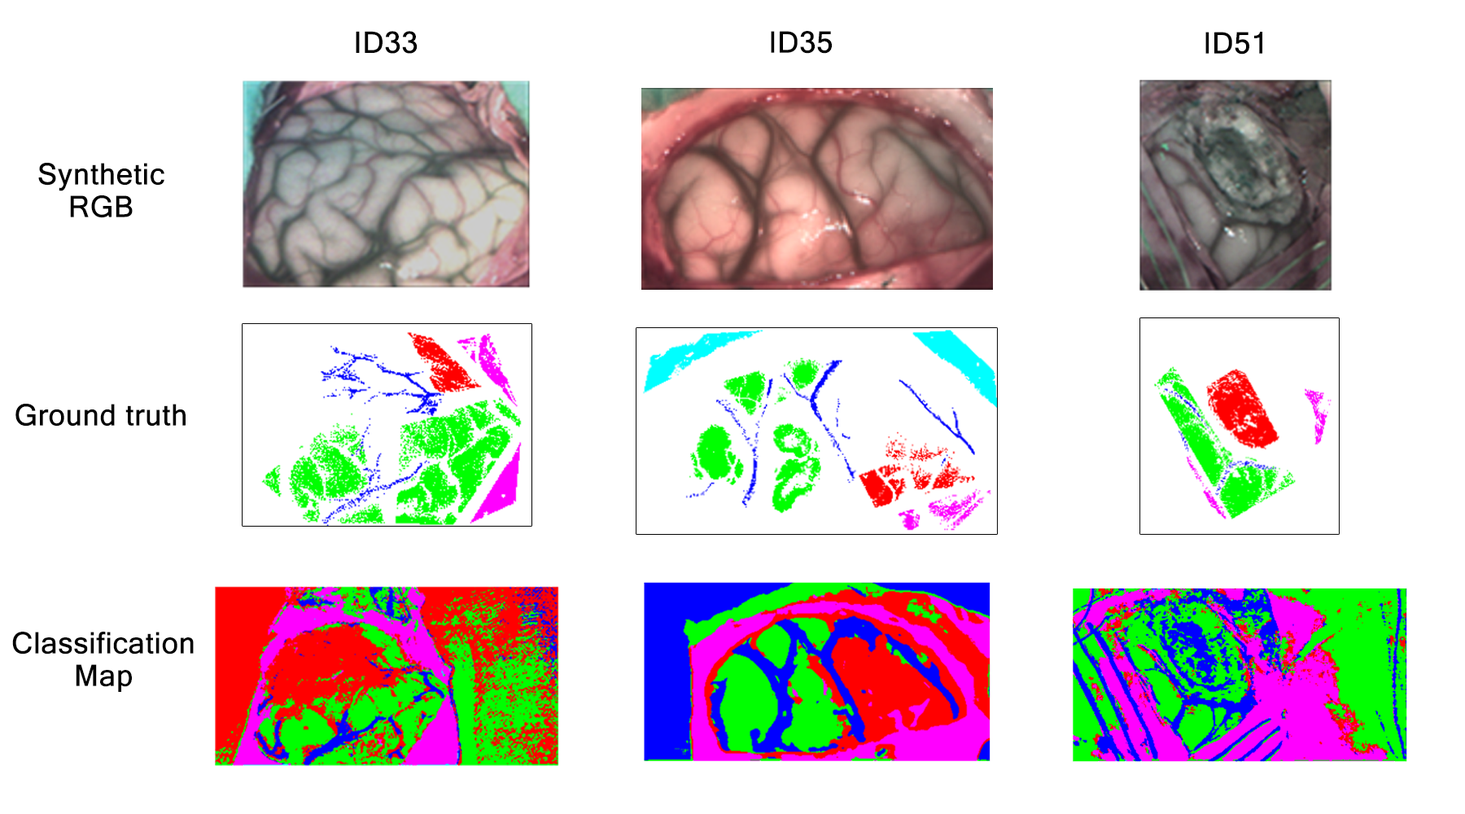
<style>
.page{position:relative;width:1465px;height:814px;background:#ffffff}
.page>*{position:absolute;margin:0}
.t1{font:29.3px "MicrosoftSansSerif";color:#000000;font-weight:bold}
.t2{font:29.3px/32.6px "MicrosoftSansSerif";color:#000000;font-weight:bold}
</style>
<div class="page">
<p class="t1" style="left:356px;top:31px;width:62px;height:23px">ID33</p>
<p class="t1" style="left:771px;top:31px;width:61px;height:23px">ID35</p>
<p class="t1" style="left:1205px;top:32px;width:57px;height:23px">ID51</p>
<p class="t2" style="left:38px;top:163px;width:126px;height:55px;text-align:center">Synthetic<br>RGB</p>
<p class="t1" style="left:15px;top:404px;width:171px;height:22px">Ground truth</p>
<p class="t2" style="left:12px;top:632px;width:182px;height:60px;text-align:center">Classification Map</p>
</div>
